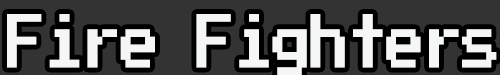
<style>
.page{position:relative;width:500px;height:75px;background:#333333}
.page>*{position:absolute;margin:0}
.t1{font:104.6px "PressStart2P";letter-spacing:-0.025em;color:#f5f6f7;scale:0.64 1}
</style>
<div class="page">
<p class="t1" style="left:7px;top:14px;width:490px;height:61px">Fire Fighters</p>
</div>
